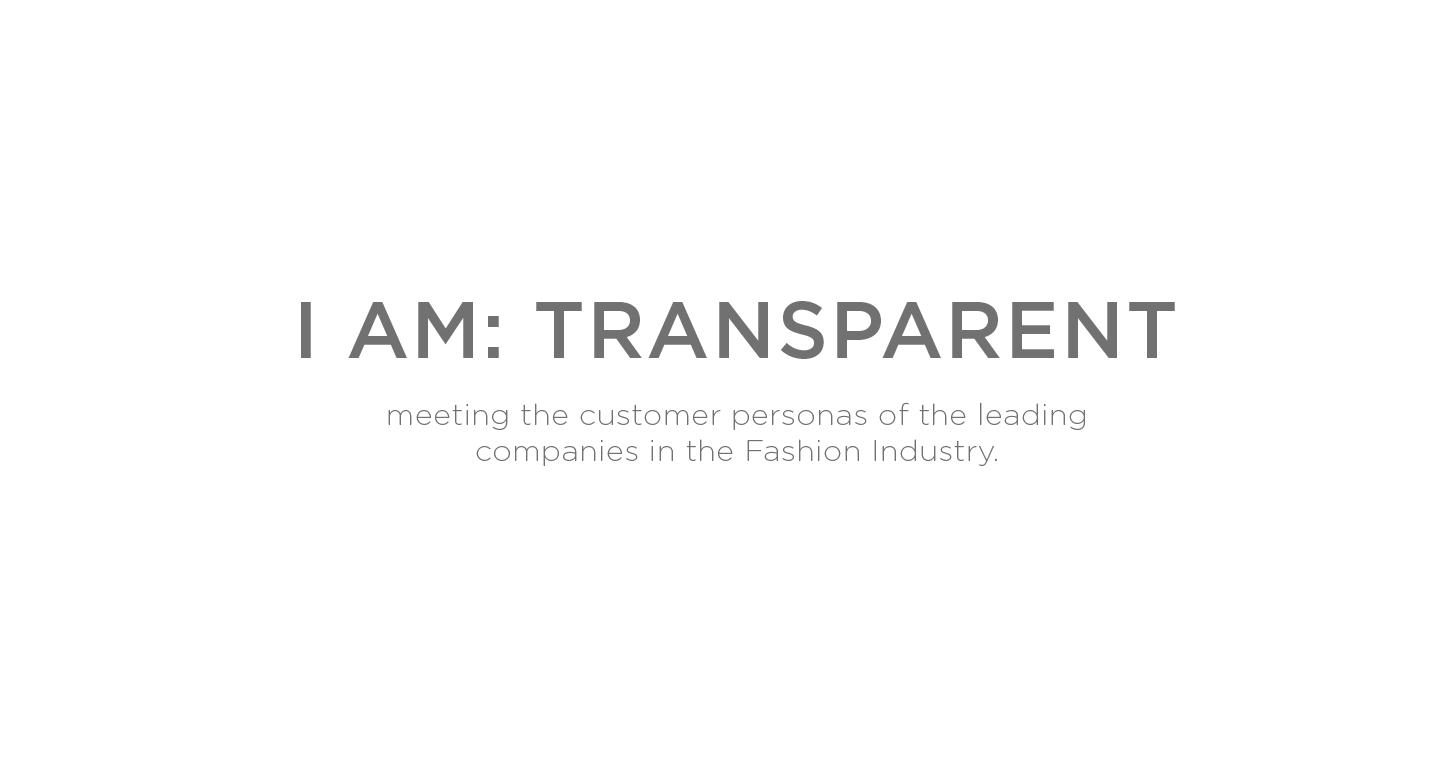
<style>
.page{position:relative;width:1455px;height:768px;background:#ffffff}
.page>*{position:absolute;margin:0}
.t1{font:80px "Gotham-Medium";letter-spacing:0.025em;color:#717171}
.t2{font:30px "Gotham-ExtraLight";letter-spacing:0.025em;color:#717171}
</style>
<div class="page">
<p class="t1" style="left:301px;top:301px;width:874px;height:58px">I AM: TRANSPARENT</p>
<p class="t2" style="left:388px;top:402px;width:697px;height:64px;text-align:center">meeting the customer personas of the leading<br>companies in the Fashion Industry.</p>
</div>
